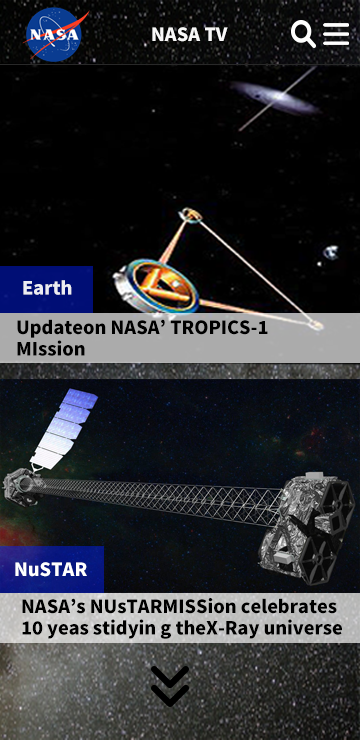
<style>
.page{position:relative;width:360px;height:740px}
.page>*{position:absolute;margin:0}
.t1{font:18px "NotoSansKR-Black";color:#f8f8f8}
.t2{font:18px "NotoSansKR-Black";color:#ffffff}
.t3{font:18px "NotoSansKR-Black";color:#000000}
</style>
<div class="page">
<p class="t1" style="left:152px;top:27px;width:76px;height:15px">NASA TV</p>
<p class="t2" style="left:23px;top:280px;width:49px;height:15px">Earth</p>
<p class="t3" style="left:17px;top:319px;width:251px;height:37px">Updateon NASA’ TROPICS-1<br>MIssion</p>
<p class="t2" style="left:15px;top:562px;width:72px;height:15px">NuSTAR</p>
<p class="t3" style="left:22px;top:598px;width:320px;height:41px">NASA’s NUsTARMISSion celebrates<br>10 yeas stidyin g theX-Ray universe</p>
</div>
